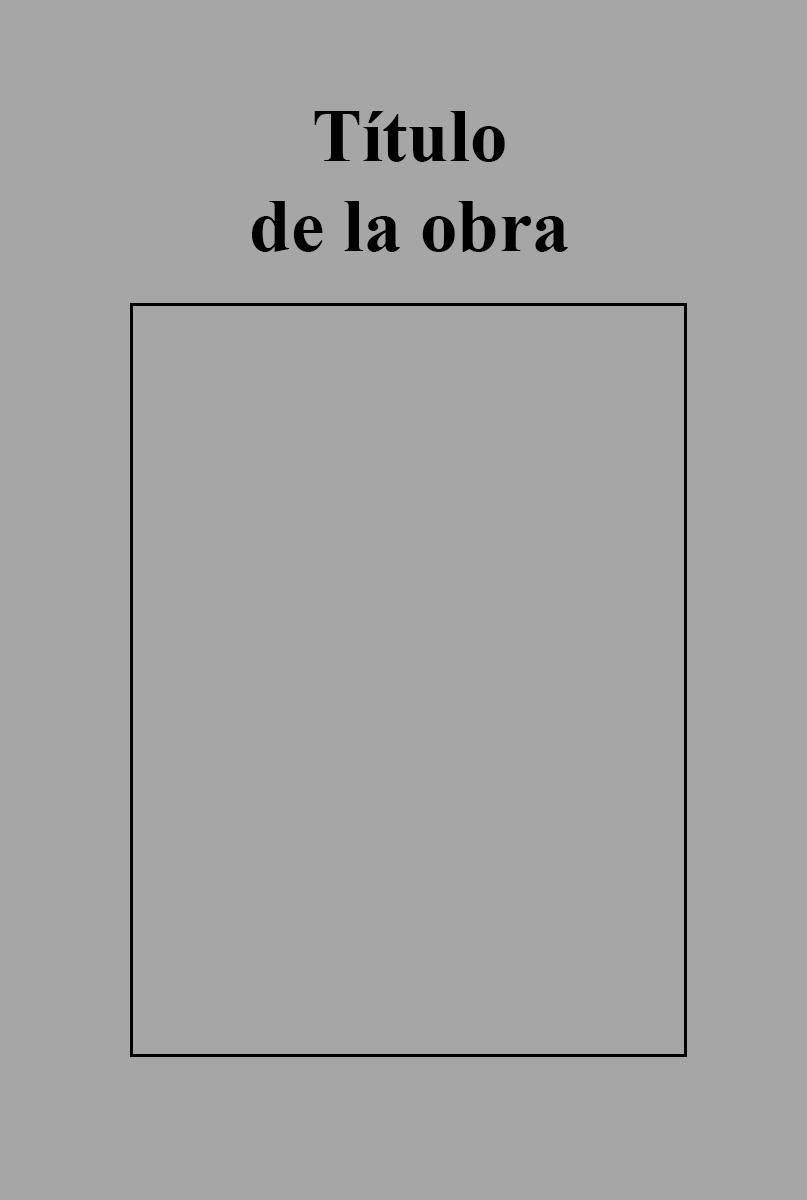
<style>
.page{position:relative;width:807px;height:1200px;background:#a6a6a6}
.page>*{position:absolute;margin:0}
.t1{font:75px "TimesNewRomanPS-BoldMT";color:#000000}
</style>
<div class="page">
<p class="t1" style="left:252px;top:111px;width:317px;height:141px;text-align:center">Título<br>de la obra</p>
</div>
